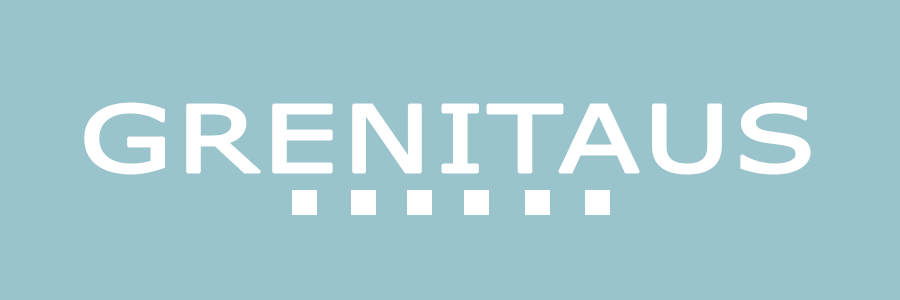
<style>
.page{position:relative;width:900px;height:300px;background:#9ac4cc}
.page>*{position:absolute;margin:0}
.t1{font:92px "MSReferenceSansSerif";color:#ffffff;text-transform:uppercase;font-weight:bold;scale:1.3 1}
</style>
<div class="page">
<p class="t1" style="left:84px;top:102px;width:727px;height:73px">grenitaus</p>
</div>
